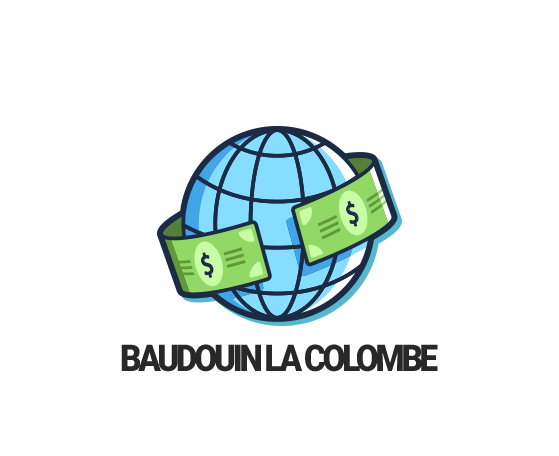
<style>
.page{position:relative;width:559px;height:456px;background:#ffffff}
.page>*{position:absolute;margin:0}
.t1{font:36.7px "Roboto-Black";letter-spacing:-0.1em;color:#282828;scale:0.91 1}
</style>
<div class="page">
<p class="t1" style="left:121px;top:344px;width:317px;height:28px">BAUDOUIN LA COLOMBE</p>
</div>
